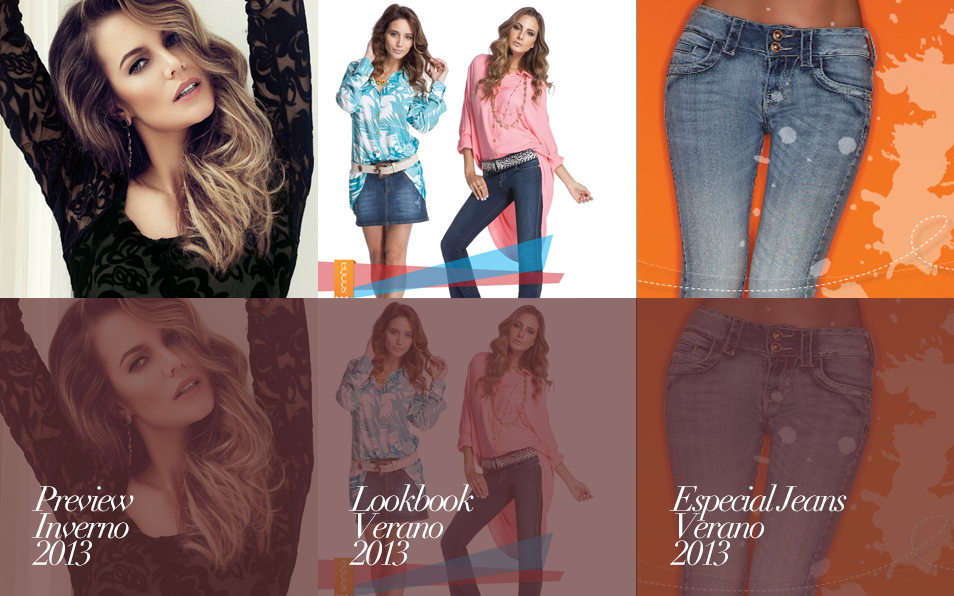
<style>
.page{position:relative;width:954px;height:596px}
.page>*{position:absolute;margin:0}
.t1{font:34.4px/27.1px "Didot-Italic";letter-spacing:-0.075em;color:#ffffff}
.t2{font:20px/27.1px "Didot-Italic";letter-spacing:-0.075em;color:#d3cec7}
</style>
<div class="page">
<p class="t1" style="left:32px;top:486px;width:102px;height:80px"><span class="t2"><br></span>Preview <br>Inverno<br>2013</p>
<p class="t1" style="left:348px;top:484px;width:126px;height:82px"><span class="t2"><br></span>Lookbook<br>Verano<br>2013</p>
<p class="t1" style="left:669px;top:484px;width:178px;height:82px"><span class="t2"><br></span>Especial Jeans<br>Verano<br>2013</p>
</div>
